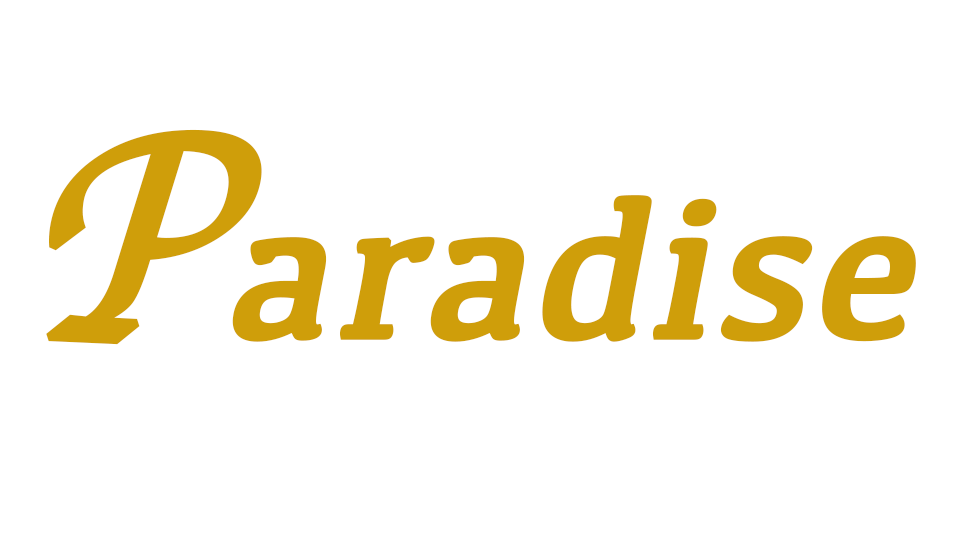
<style>
.page{position:relative;width:960px;height:540px;background:#ffffff}
.page>*{position:absolute;margin:0}
.t1{font:200px "Kefa-Regular";color:#cf9e0a;font-weight:bold;font-style:italic}
.t2{font:300px "Apple-Chancery";color:#cf9e0a;font-weight:bold;font-style:italic}
</style>
<div class="page">
<p class="t1" style="left:46px;top:129px;width:870px;height:216px"><span class="t2">P</span>aradise</p>
</div>
